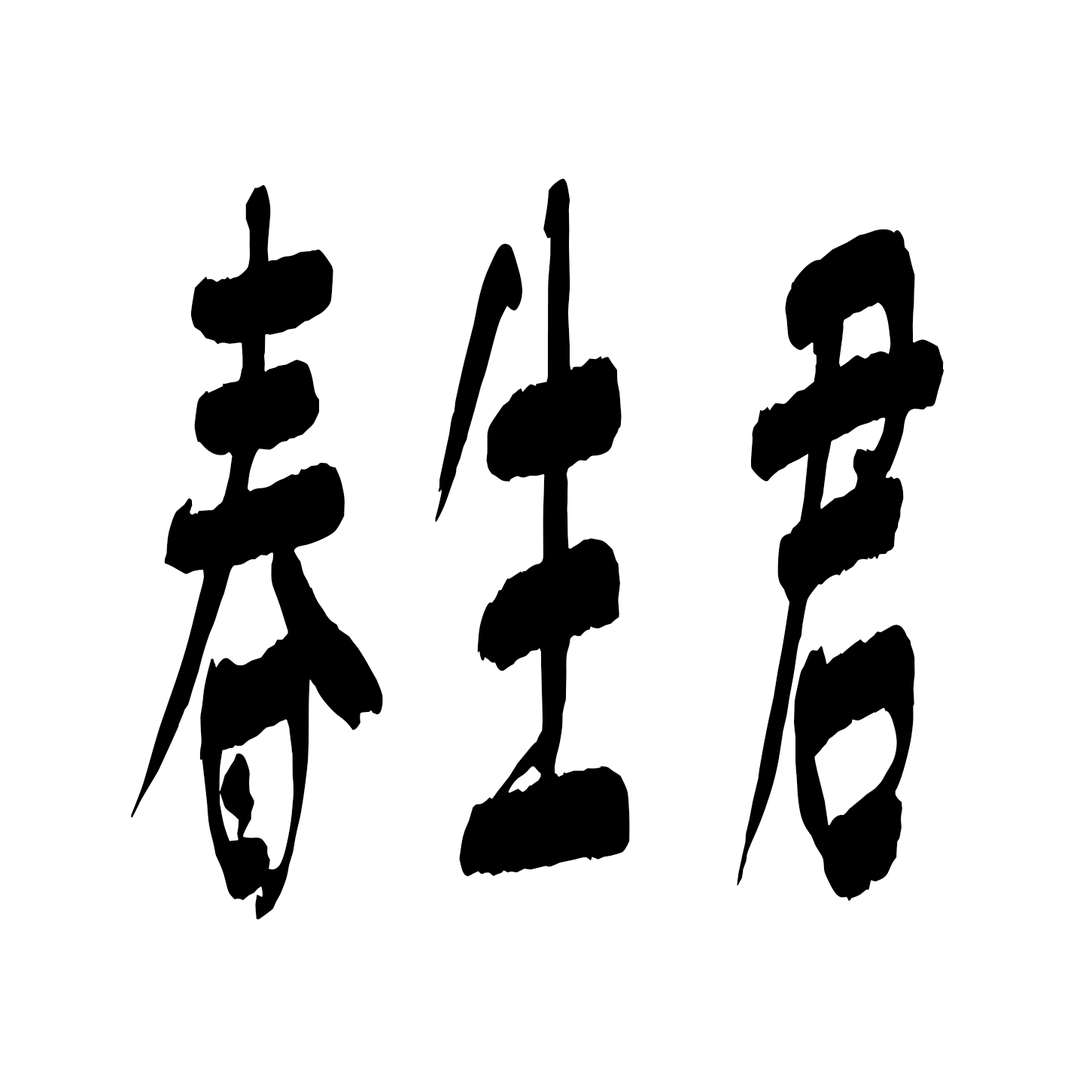
<style>
.page{position:relative;width:1092px;height:1092px;background:#ffffff}
.page>*{position:absolute;margin:0}
.t1{font:836.6px "HYn1gf";color:#000000;scale:0.35 1}
</style>
<div class="page">
<p class="t1" style="left:131px;top:178px;width:813px;height:742px">春生君</p>
</div>
